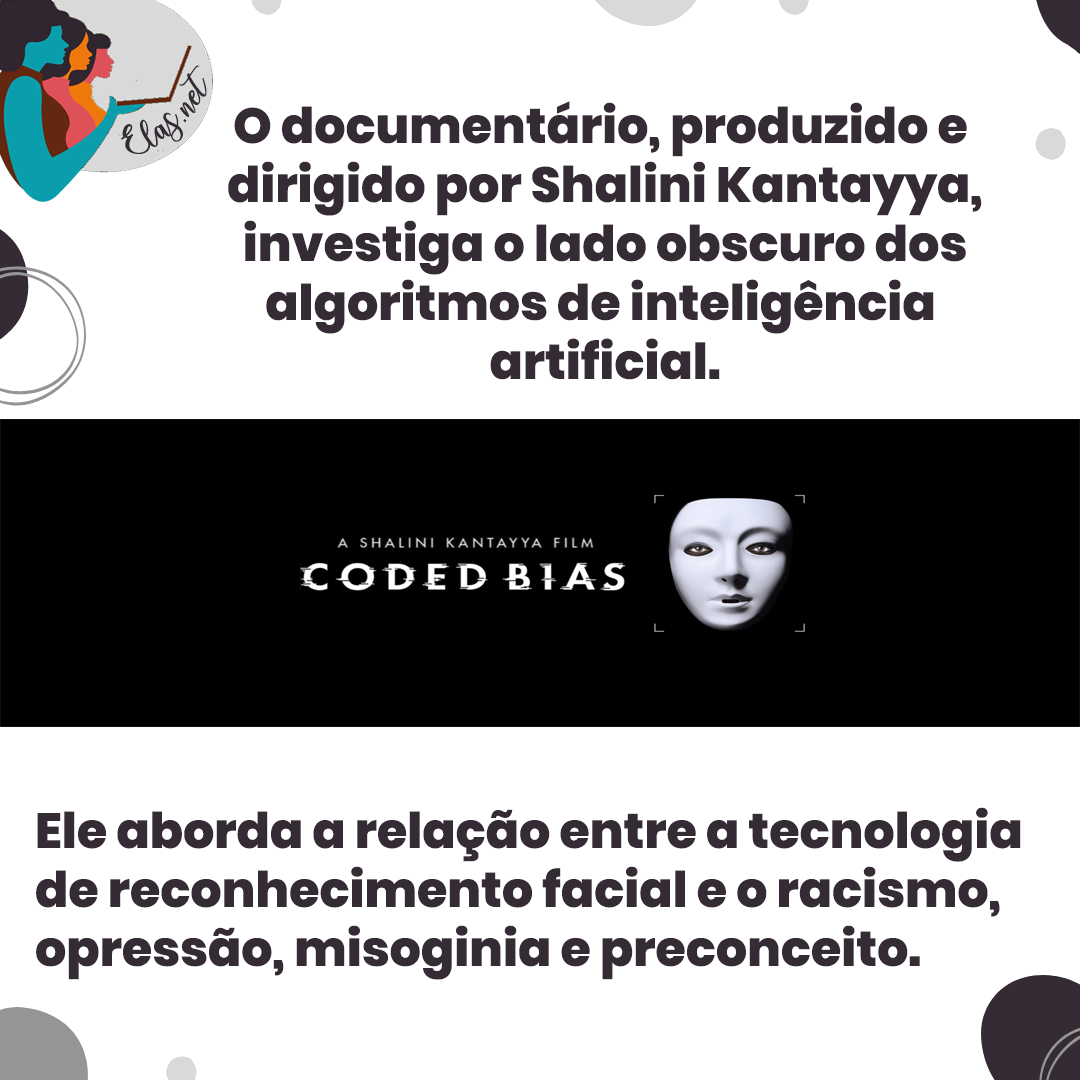
<style>
.page{position:relative;width:1080px;height:1080px;background:#ffffff}
.page>*{position:absolute;margin:0}
.t1{font:25px "charlinda-Regular";color:#342b34;scale:1.18 1}
.t2{font:49.1px "Poppins-ExtraBold";color:#342b34}
</style>
<div class="page">
<p class="t1" style="left:121px;top:65px;width:86px;height:89px;rotate:-43deg">Elas.net</p>
<p class="t2" style="left:228px;top:101px;width:754px;height:279px;text-align:center">O documentário, produzido e <br>dirigido por Shalini Kantayya,<br>investiga o lado obscuro dos<br>algoritmos de inteligência <br>artificial.</p>
<p class="t2" style="left:36px;top:807px;width:985px;height:173px">Ele aborda a relação entre a tecnologia <br>de reconhecimento facial e o racismo, <br>opressão, misoginia e preconceito.</p>
</div>
